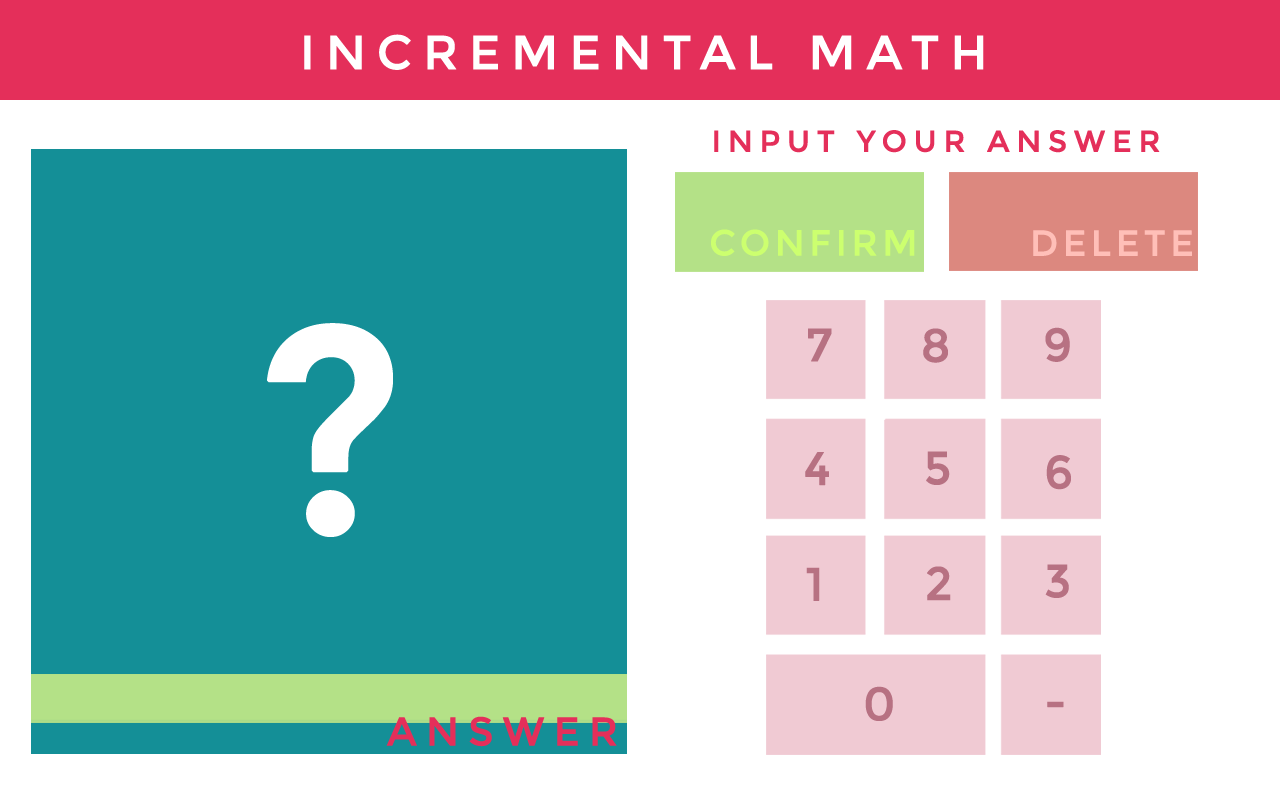
<style>
.page{position:relative;width:1280px;height:800px;background:#ffffff}
.page>*{position:absolute;margin:0}
.t1{font:48px "Montserrat-Regular";letter-spacing:0.2em;color:#ffffff;text-transform:uppercase;font-weight:bold}
.t2{font:30px "Montserrat-Regular";letter-spacing:0.2em;color:#e42f5a;text-transform:uppercase;font-weight:bold}
.t3{font:36px "Montserrat-Regular";letter-spacing:0.1em;color:#ccff6f;text-transform:uppercase;font-weight:bold}
.t4{font:36px "Montserrat-Regular";letter-spacing:0.1em;color:#ffbfb8;text-transform:uppercase;font-weight:bold}
.t5{font:292.4px "Montserrat-Regular";letter-spacing:0.2em;color:#ffffff;text-transform:uppercase;font-weight:bold}
.t6{font:46.4px "Montserrat-Regular";letter-spacing:0.2em;color:#b77182;text-transform:uppercase;font-weight:bold}
.t7{font:40px "Montserrat-Regular";letter-spacing:0.2em;color:#e42f5a;text-transform:uppercase;font-weight:bold}
</style>
<div class="page">
<p class="t1" style="left:304px;top:34px;width:680px;height:36px">Incremental Math</p>
<p class="t2" style="left:714px;top:130px;width:446px;height:23px">Input your Answer</p>
<p class="t3" style="left:711px;top:229px;width:204px;height:27px">Confirm</p>
<p class="t4" style="left:1033px;top:230px;width:159px;height:26px">Delete</p>
<p class="t5" style="left:267px;top:323px;width:126px;height:214px">?</p>
<p class="t6" style="left:808px;top:328px;width:24px;height:34px">7</p>
<p class="t6" style="left:923px;top:328px;width:25px;height:35px">8</p>
<p class="t6" style="left:1045px;top:327px;width:25px;height:35px">9</p>
<p class="t6" style="left:805px;top:452px;width:24px;height:34px">4</p>
<p class="t6" style="left:926px;top:451px;width:24px;height:34px">5</p>
<p class="t6" style="left:1046px;top:455px;width:25px;height:35px">6</p>
<p class="t6" style="left:806px;top:567px;width:14px;height:34px">1</p>
<p class="t6" style="left:927px;top:566px;width:24px;height:35px">2</p>
<p class="t6" style="left:1045px;top:564px;width:24px;height:34px">3</p>
<p class="t6" style="left:865px;top:686px;width:28px;height:35px">0</p>
<p class="t6" style="left:1047px;top:701px;width:17px;height:7px">-</p>
<p class="t7" style="left:386px;top:716px;width:231px;height:31px">Answer</p>
</div>
